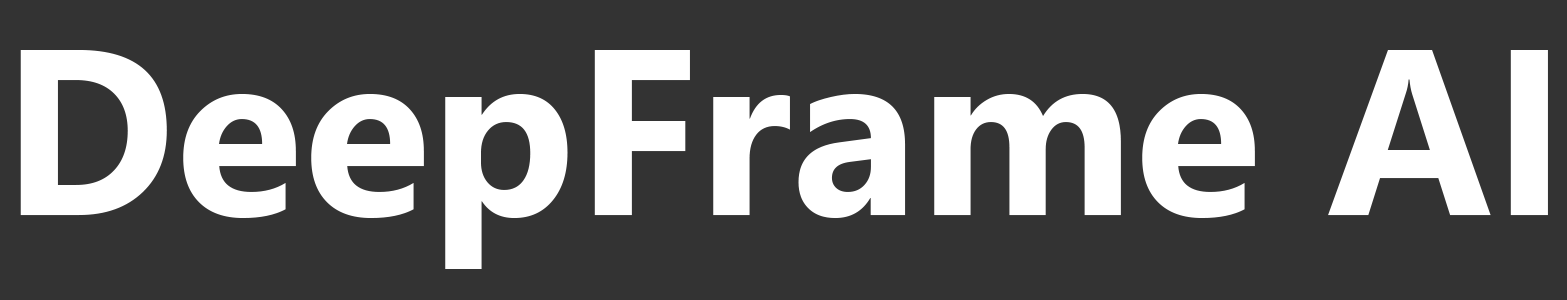
<style>
.page{position:relative;width:1567px;height:300px;background:#333333}
.page>*{position:absolute;margin:0}
.t1{font:235.5px "NirmalaUI-Bold";color:#ffffff}
</style>
<div class="page">
<p class="t1" style="left:20px;top:50px;width:1528px;height:219px">DeepFrame AI</p>
</div>
